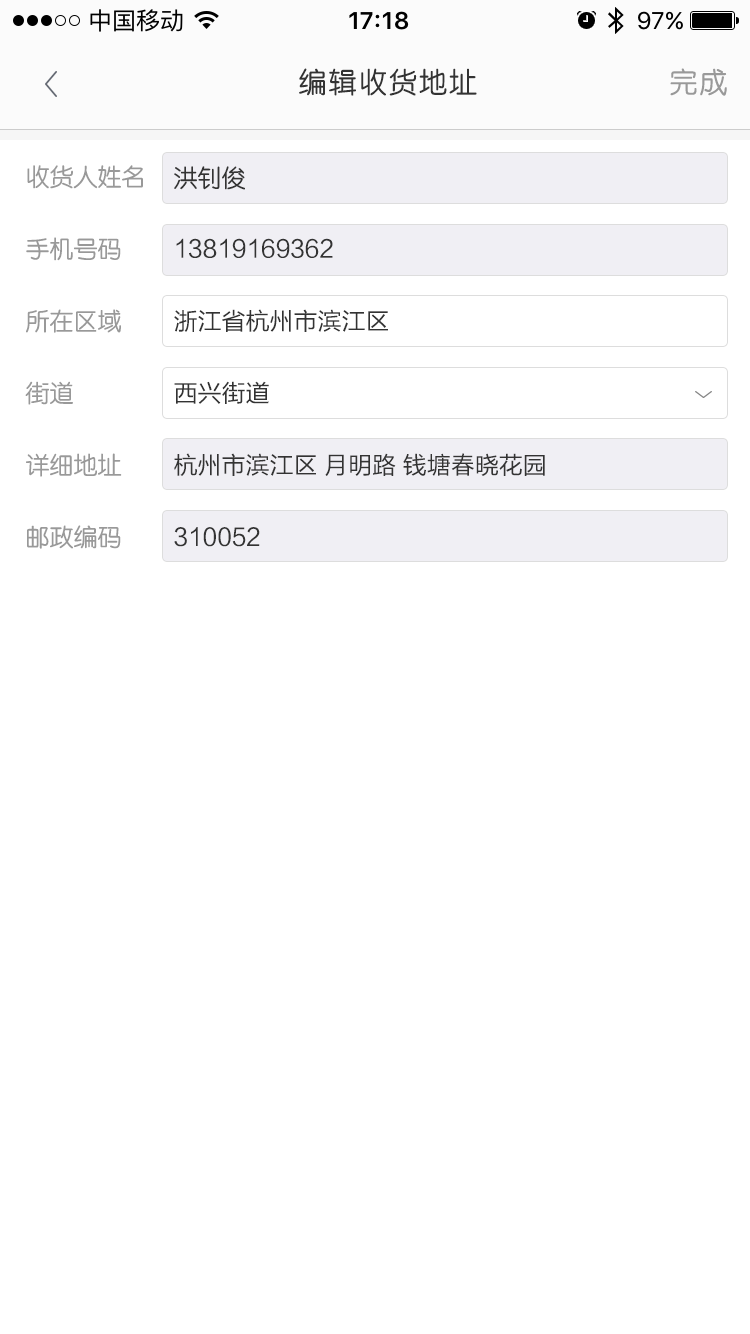
<style>
.page{position:relative;width:750px;height:1334px;background:#ffffff}
.page>*{position:absolute;margin:0}
.t1{font:28px "STYuanti-SC-Regular";letter-spacing:0.075em;color:#333333}
.t2{font:28px "STYuanti-SC-Regular";letter-spacing:0.075em;color:#999999}
.t3{font:24px/72px "STYuanti-SC-Regular";color:#999999}
.t4{font:24px/72px "FZLTHK_ZJRB--GBK1-0";color:#333333}
.t5{font:24px/72px "STYuanti-SC-Regular";color:#333333}
</style>
<div class="page">
<p class="t1" style="left:299px;top:68px;width:178px;height:28px">编辑收货地址</p>
<p class="t2" style="left:670px;top:68px;width:57px;height:28px">完成</p>
<p class="t3" style="left:25px;top:165px;width:118px;height:384px">收货人姓名<br>手机号码<br>所在区域<br>街道<br>详细地址<br>邮政编码</p>
<p class="t4" style="left:174px;top:166px;width:371px;height:381px"><span class="t5">洪钊俊<br></span>13819169362<br>浙江省杭州市滨江区<br>西兴街道<br>杭州市滨江区 月明路 钱塘春晓花园<br>310052</p>
</div>
